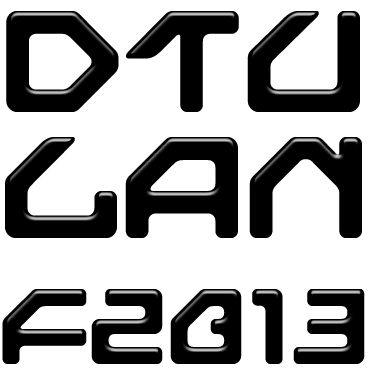
<style>
.page{position:relative;width:375px;height:375px;background:#ffffff}
.page>*{position:absolute;margin:0}
.t1{font:150px/126px "NextGames";letter-spacing:-0.025em;color:#000000}
.t2{font:112px/126px "NextGames";letter-spacing:-0.025em;color:#000000}
</style>
<div class="page">
<p class="t1" style="left:2px;top:11px;width:363px;height:353px">DTU<br>LAN<br><span class="t2">F2013</span></p>
</div>
